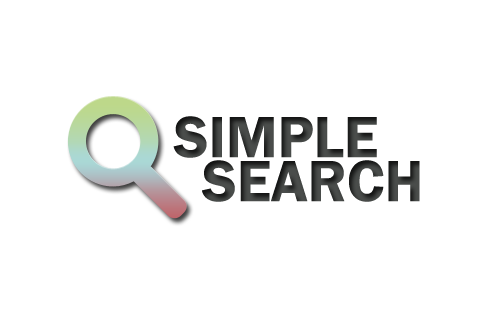
<style>
.page{position:relative;width:500px;height:333px;background:#ffffff}
.page>*{position:absolute;margin:0}
.t1{font:60px "FranklinGothic-Demi";color:#4a4d4b}
</style>
<div class="page">
<p class="t1" style="left:173px;top:116px;width:204px;height:42px">SIMPLE</p>
<p class="t1" style="left:202px;top:160px;width:218px;height:42px">SEARCH</p>
</div>
